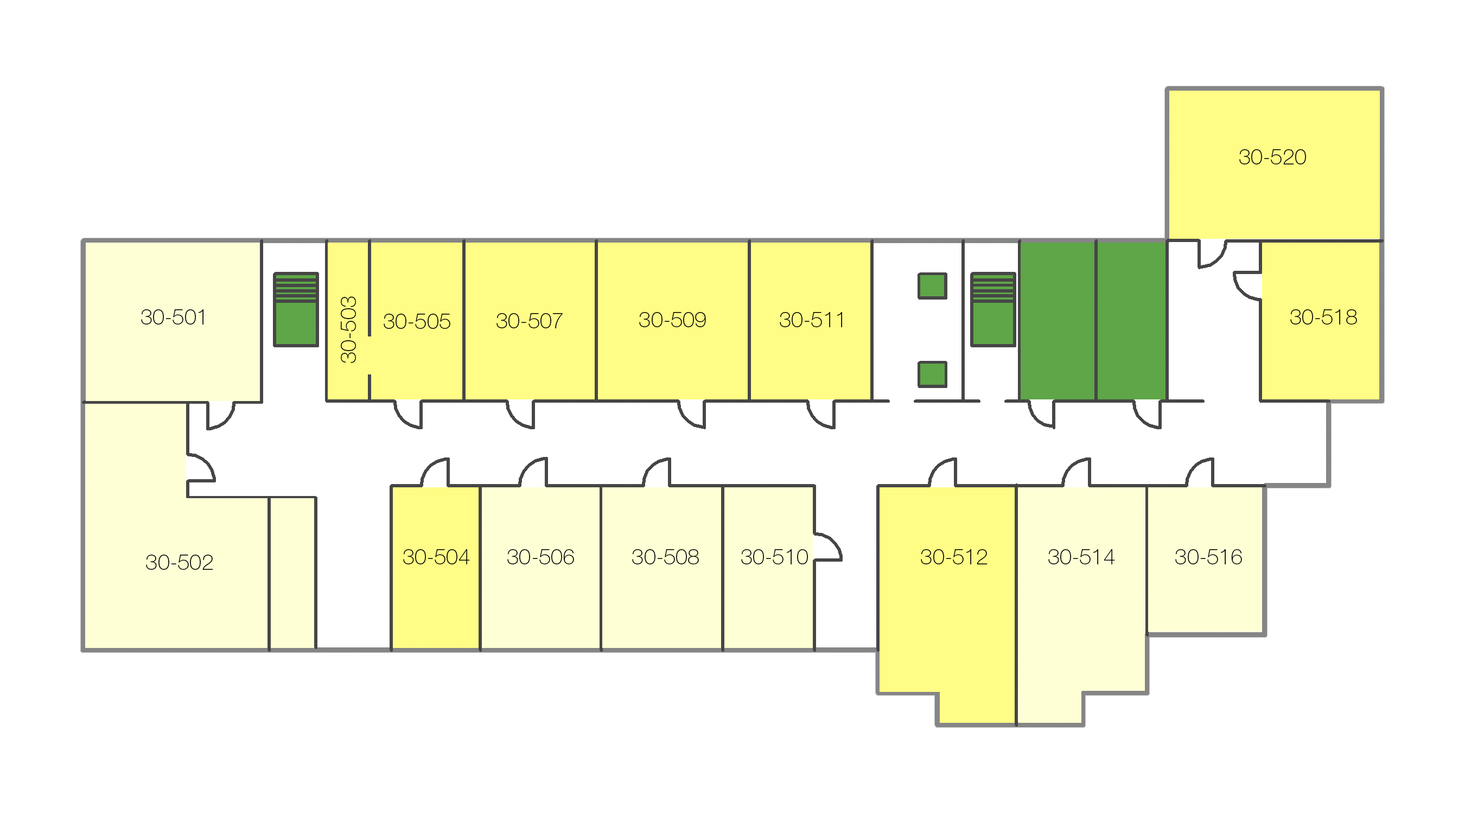
<style>
.page{position:relative;width:1465px;height:814px;background:#ffffff}
.page>*{position:absolute;margin:0}
.t1{font:21.7px "HelveticaNeueCyr-Thin";color:#000000;font-variant:small-caps}
</style>
<div class="page">
<p class="t1" style="left:1239px;top:149px;width:67px;height:15px">30-520</p>
<p class="t1" style="left:341px;top:296px;width:15px;height:67px;rotate:-90deg">30-503</p>
<p class="t1" style="left:141px;top:309px;width:62px;height:15px">30-501</p>
<p class="t1" style="left:384px;top:314px;width:66px;height:15px">30-505</p>
<p class="t1" style="left:496px;top:313px;width:67px;height:15px">30-507</p>
<p class="t1" style="left:639px;top:312px;width:67px;height:15px">30-509</p>
<p class="t1" style="left:780px;top:312px;width:62px;height:15px">30-511</p>
<p class="t1" style="left:1290px;top:309px;width:67px;height:15px">30-518</p>
<p class="t1" style="left:146px;top:555px;width:67px;height:15px">30-502</p>
<p class="t1" style="left:403px;top:549px;width:67px;height:15px">30-504</p>
<p class="t1" style="left:507px;top:549px;width:67px;height:15px">30-506</p>
<p class="t1" style="left:632px;top:549px;width:67px;height:15px">30-508</p>
<p class="t1" style="left:741px;top:549px;width:67px;height:15px">30-510</p>
<p class="t1" style="left:921px;top:549px;width:67px;height:15px">30-512</p>
<p class="t1" style="left:1048px;top:549px;width:67px;height:15px">30-514</p>
<p class="t1" style="left:1175px;top:549px;width:67px;height:15px">30-516</p>
</div>
